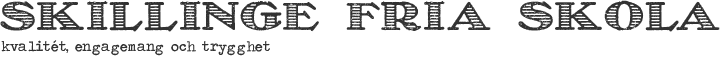
<style>
.page{position:relative;width:720px;height:60px;background:#ffffff}
.page>*{position:absolute;margin:0}
.t1{font:40px "Olechstripes";letter-spacing:0.025em;color:#323232}
.t2{font:14px "TravelingTypewriter";letter-spacing:0.025em;color:#323232}
</style>
<div class="page">
<p class="t1" style="left:0px;top:0px;width:720px;height:32px">Skillinge fria skola</p>
<p class="t2" style="left:1px;top:40px;width:269px;height:16px">kvalitét, engagemang och trygghet</p>
</div>
